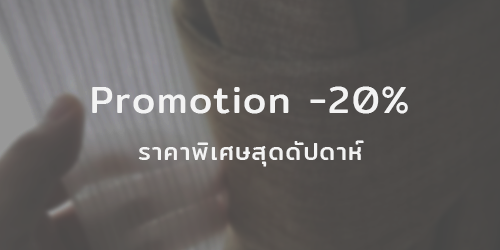
<style>
.page{position:relative;width:500px;height:250px}
.page>*{position:absolute;margin:0}
.t1{font:37.3px "Mitr-Regular";letter-spacing:0.05em;color:#f3f3f3}
.t2{font:24px "Mitr-Regular";letter-spacing:0.05em;color:#f3f3f3}
</style>
<div class="page">
<p class="t1" style="left:92px;top:86px;width:316px;height:28px">Promotion -20%</p>
<p class="t2" style="left:138px;top:140px;width:226px;height:27px">ราคาพิเศษสุดดัปดาห์</p>
</div>
